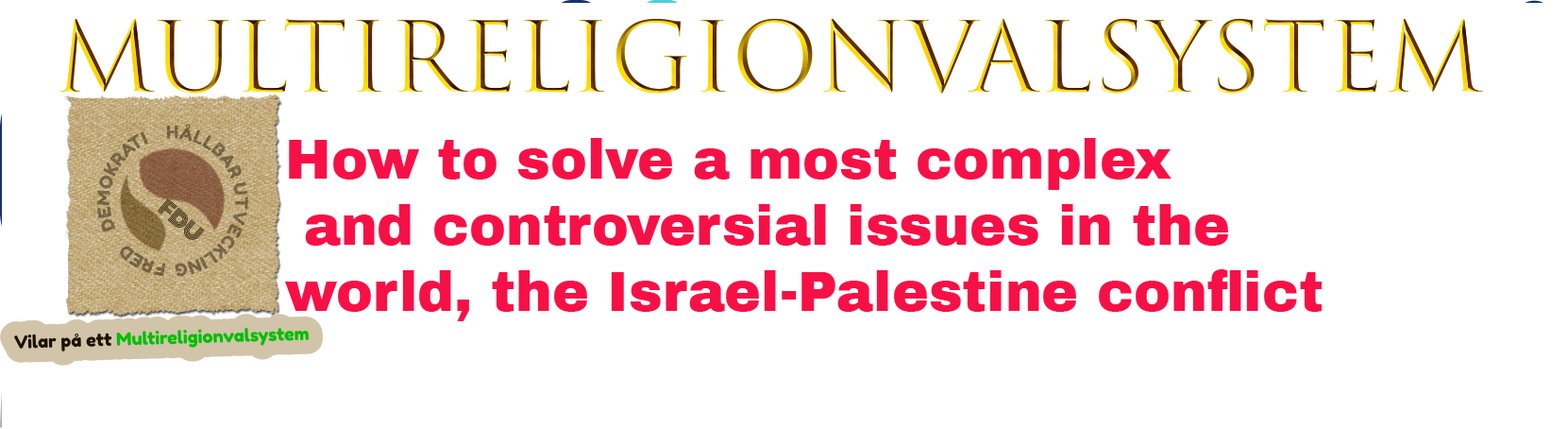
<style>
.page{position:relative;width:1568px;height:429px;background:#ffffff}
.page>*{position:absolute;margin:0}
.t1{font:94.4px "TrajanColor-Concept"}
.t2{font:55.1px "ArchivoBlack-Regular";color:#f71046}
</style>
<div class="page">
<p class="t1" style="left:59px;top:18px;width:1424px;height:75px">Multireligionvalsystem</p>
<p class="t2" style="left:285px;top:138px;width:1037px;height:183px">How to solve a most complex<br> and controversial issues in the <br>world, the Israel-Palestine conflict</p>
</div>
